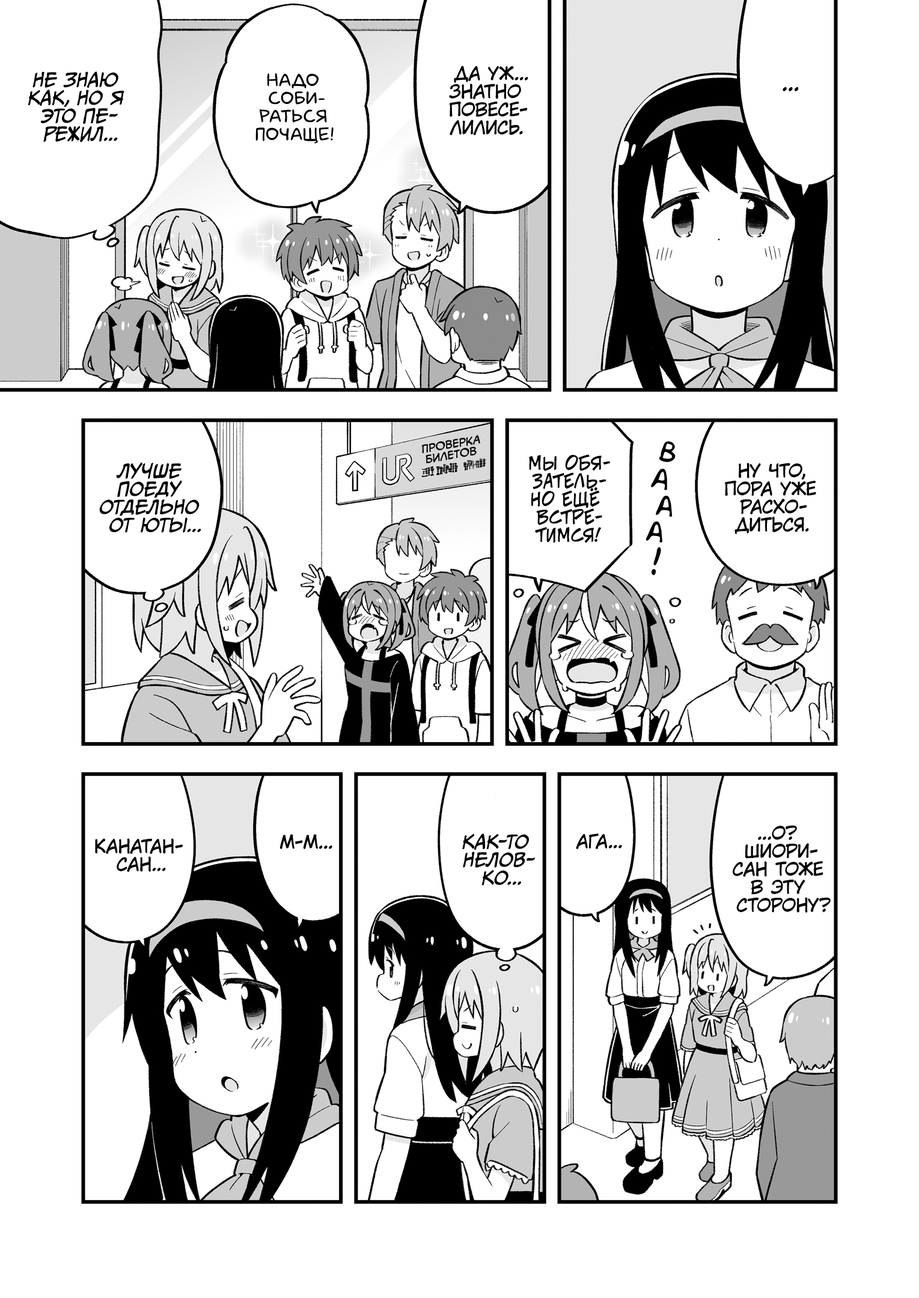
<style>
.page{position:relative;width:919px;height:1298px;background:#ffffff}
.page>*{position:absolute;margin:0}
.t1{font:18px "KuraiVoice2";color:#000000;text-transform:uppercase}
.t2{font:18px "CCMeanwhile";color:#000000;text-transform:uppercase;font-style:italic}
.t3{font:18px "laCartoonerie";color:#000000;text-transform:uppercase}
.t4{font:21.6px "KuraiVoice2";color:#000000;text-transform:uppercase}
.t5{font:10.8px "v_CCMonologous";color:#000000;text-transform:uppercase;scale:1.04 1}
.t6{font:28.8px "AkbarPlain";color:#000000}
.t7{font:18px "v_CCJeffCampbell";color:#000000;text-transform:uppercase}
</style>
<div class="page">
<p class="t1" style="left:449px;top:65px;width:79px;height:70px;text-align:center">Да уж...<br>Знатно<br>повесе-<br>лились.</p>
<p class="t2" style="left:28px;top:72px;width:96px;height:70px;text-align:center">Не знаю<br>как, но я<br>это пе-<br>режил...</p>
<p class="t3" style="left:255px;top:73px;width:78px;height:71px;text-align:center">Надо<br>соби-<br>раться<br>почаще!</p>
<p class="t4" style="left:782px;top:87px;width:17px;height:4px">...</p>
<p class="t5" style="left:422px;top:435px;width:58px;height:28px;text-align:center;rotate:-10deg">Проверка<br>билетов</p>
<p class="t6" style="left:659px;top:441px;width:16px;height:21px;rotate:7deg">в</p>
<p class="t7" style="left:529px;top:454px;width:81px;height:89px;text-align:center">Мы обя-<br>затель-<br>но ещё<br>встре-<br>тимся!</p>
<p class="t2" style="left:99px;top:462px;width:102px;height:71px;text-align:center">Лучше<br>поеду<br>отдельно<br>от Юты...</p>
<p class="t6" style="left:651px;top:469px;width:16px;height:21px;rotate:8deg">а</p>
<p class="t1" style="left:725px;top:463px;width:91px;height:71px;text-align:center">Ну что,<br>пора уже<br>расхо-<br>диться.</p>
<p class="t6" style="left:656px;top:496px;width:16px;height:21px;rotate:3deg">а</p>
<p class="t6" style="left:646px;top:521px;width:16px;height:22px;rotate:4deg">а</p>
<p class="t6" style="left:651px;top:547px;width:10px;height:28px;rotate:10deg">!</p>
<p class="t2" style="left:462px;top:833px;width:73px;height:52px;text-align:center">Как-то<br>нелов-<br>ко...</p>
<p class="t1" style="left:576px;top:833px;width:46px;height:16px">Ага...</p>
<p class="t1" style="left:732px;top:825px;width:98px;height:88px;text-align:center">...О?<br>Шиори-<br>сан тоже<br>в эту<br>сторону?</p>
<p class="t1" style="left:95px;top:838px;width:88px;height:34px;text-align:center">Канатан-<br>сан...</p>
<p class="t1" style="left:279px;top:834px;width:53px;height:15px">М-м...</p>
</div>
